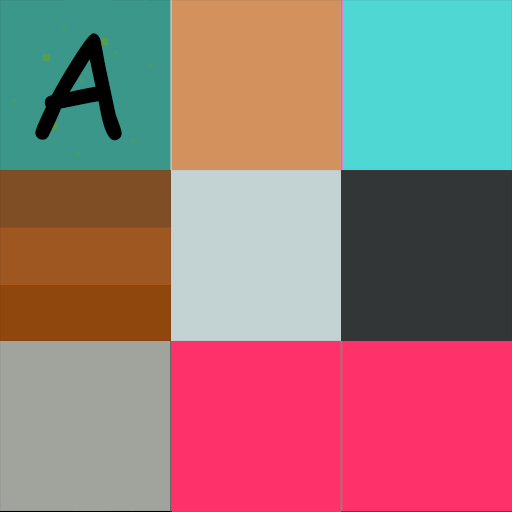
<style>
.page{position:relative;width:512px;height:512px;background:#ff316a}
.page>*{position:absolute;margin:0}
.t1{font:145px "ComicSansMS";color:#000000}
</style>
<div class="page">
<p class="t1" style="left:35px;top:33px;width:87px;height:108px">A</p>
</div>
